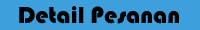
<style>
.page{position:relative;width:200px;height:30px;background:#3e9fdd}
.page>*{position:absolute;margin:0}
.t1{font:24px "Bauhaus93";color:#000000}
</style>
<div class="page">
<p class="t1" style="left:19px;top:6px;width:160px;height:18px">Detail Pesanan</p>
</div>
